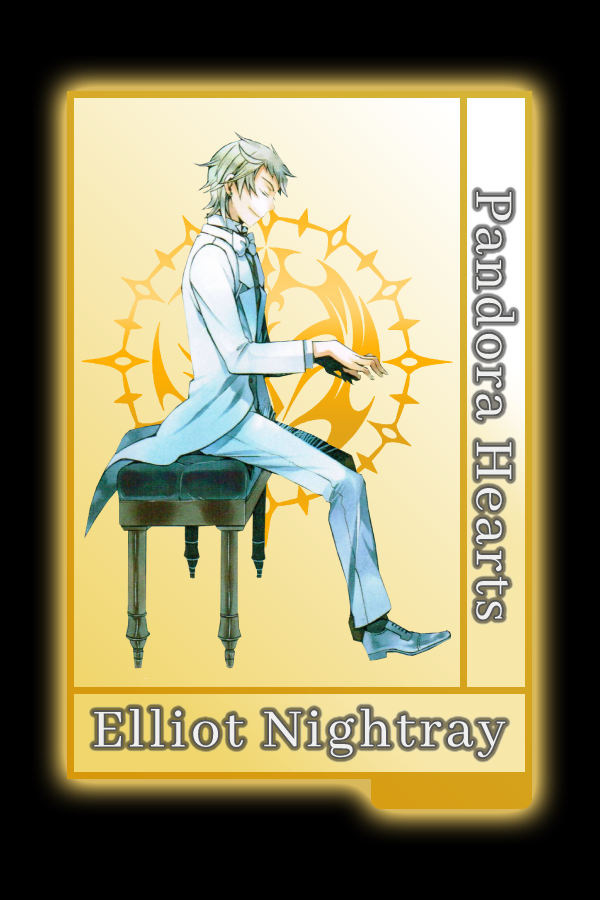
<style>
.page{position:relative;width:600px;height:900px;background:#000000}
.page>*{position:absolute;margin:0}
.t1{font:59.1px "AbhayaLibre-Regular";letter-spacing:0.072em;color:#efefef}
.t2{font:59px "AbhayaLibre-Regular";letter-spacing:0.072em;color:#efefef}
</style>
<div class="page">
<p class="t1" style="left:476px;top:192px;width:39px;height:428px;rotate:90deg">Pandora Hearts</p>
<p class="t2" style="left:94px;top:708px;width:412px;height:50px">Elliot Nightray</p>
</div>
